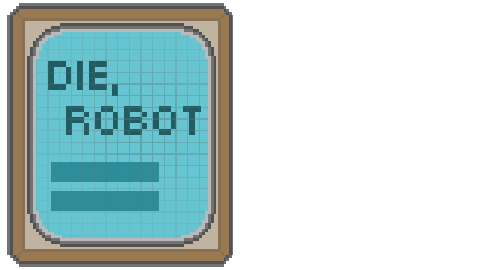
<style>
.page{position:relative;width:480px;height:270px;background:#ffffff}
.page>*{position:absolute;margin:0}
.t1{font:60px/45px "MunroSmall";color:#225c63}
</style>
<div class="page">
<p class="t1" style="left:48px;top:61px;width:153px;height:74px">Die, <br> Robot</p>
</div>
